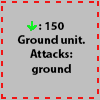
<style>
.page{position:relative;width:100px;height:100px;background:#bfbfbf}
.page>*{position:absolute;margin:0}
.t1{font:12px "MyriadPro-Bold";color:#000000}
</style>
<div class="page">
<p class="t1" style="left:17px;top:22px;width:68px;height:53px;text-align:center">: 150<br>Ground unit.<br>Attacks: ground</p>
</div>
